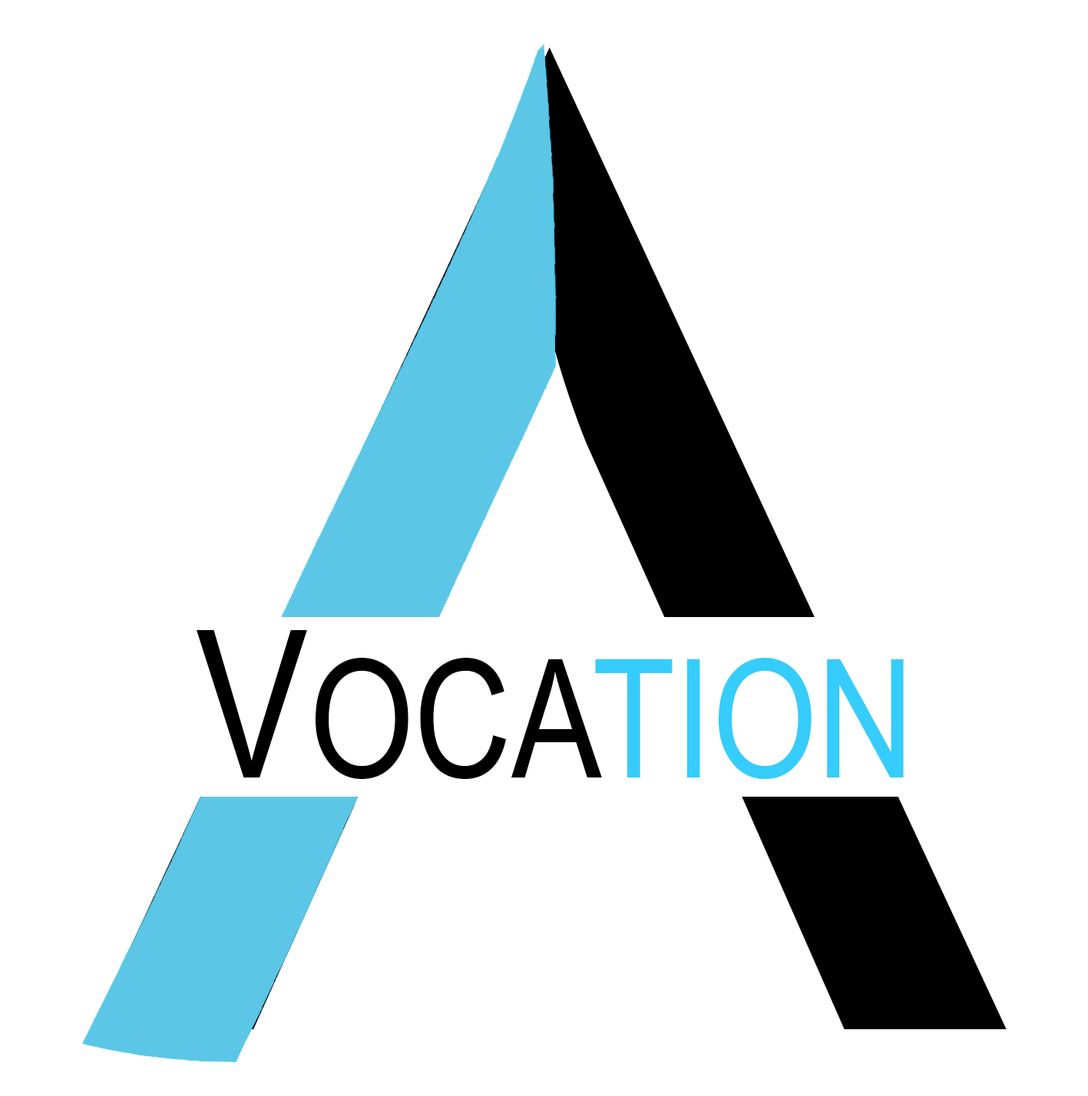
<style>
.page{position:relative;width:1088px;height:1096px;background:#ffffff}
.page>*{position:absolute;margin:0}
.t1{font:165px "ArialNarrow";color:#36ccfc}
.t2{font:205.4px "ArialNarrow";color:#000000}
.t3{font:165px "ArialNarrow";color:#000000}
</style>
<div class="page">
<p class="t1" style="left:197px;top:630px;width:707px;height:149px"><span class="t2">V</span><span class="t3">OCA</span>TION</p>
</div>
